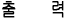
<style>
.page{position:relative;width:74px;height:18px;background:#ffffff}
.page>*{position:absolute;margin:0}
.t1{font:19.4px "Gulim";color:#010101;font-weight:bold;scale:0.8 1}
</style>
<div class="page">
<p class="t1" style="left:2px;top:1px;width:62px;height:17px">출     력</p>
</div>
